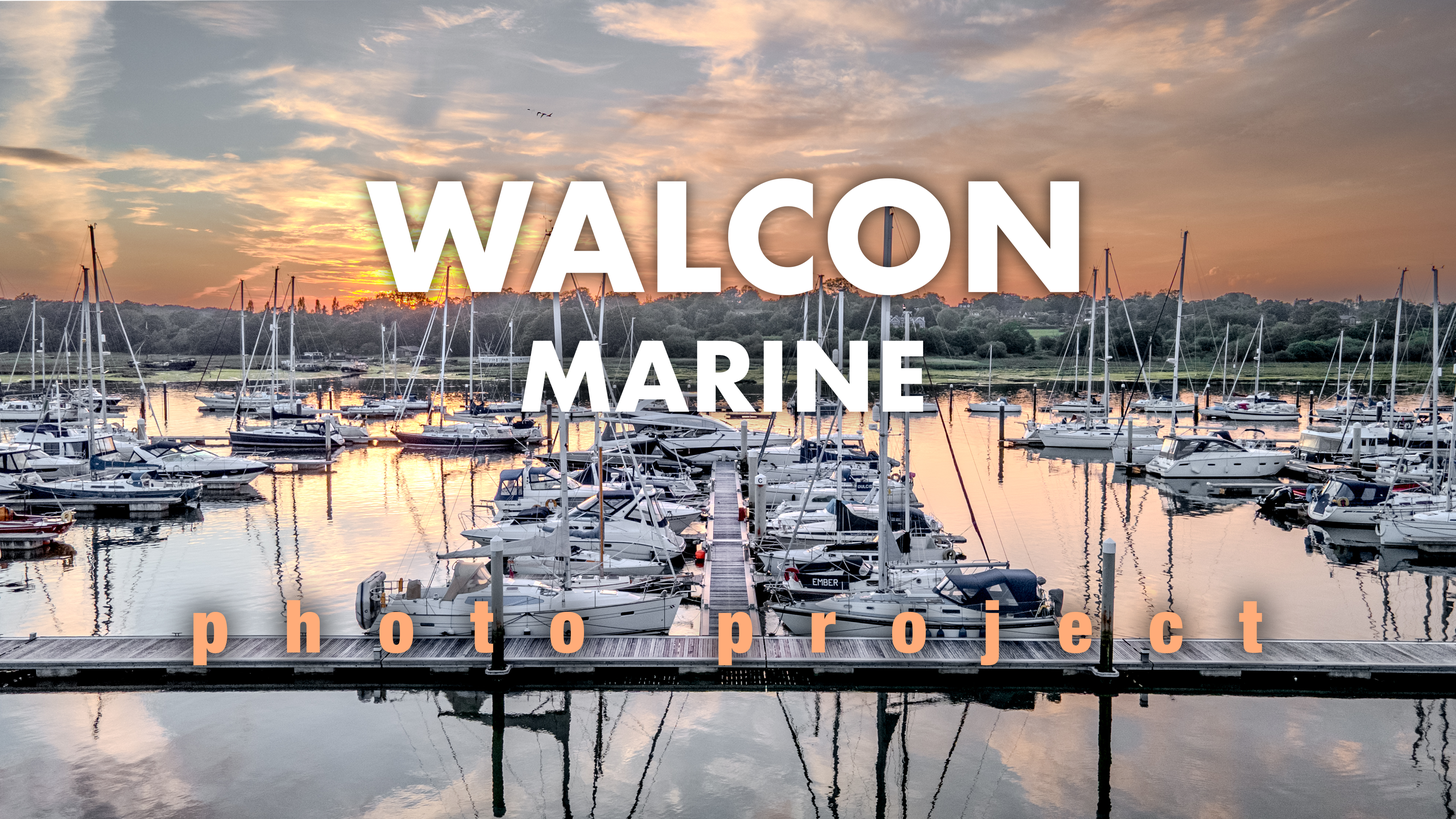
<style>
.page{position:relative;width:1456px;height:819px}
.page>*{position:absolute;margin:0}
.t1{font:146.9px "Futura-Bold";color:#ffffff}
.t2{font:94px "Futura-Bold";color:#ffffff}
.t3{font:73.2px "HelveticaNeue-CondensedBlack";letter-spacing:0.76em;color:#ffac79}
</style>
<div class="page">
<p class="t1" style="left:366px;top:178px;width:713px;height:117px">WALCON</p>
<p class="t2" style="left:521px;top:341px;width:402px;height:71px">MARINE</p>
<p class="t3" style="left:193px;top:600px;width:1069px;height:65px">photo project</p>
</div>
